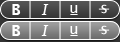
<style>
.page{position:relative;width:120px;height:42px}
.page>*{position:absolute;margin:0}
.t1{font:15px "LucidaGrande-Bold";letter-spacing:-0.025em;color:#ffffff}
.t2{font:15px "LucidaBright-Italic";letter-spacing:-0.025em;color:#ffffff}
.t3{font:15px "LucidaGrande";letter-spacing:-0.025em;color:#ffffff}
</style>
<div class="page">
<p class="t1" style="left:12px;top:4px;width:9px;height:11px">B</p>
<p class="t2" style="left:41px;top:4px;width:8px;height:11px">I</p>
<p class="t3" style="left:70px;top:5px;width:8px;height:8px">u</p>
<p class="t3" style="left:101px;top:4px;width:6px;height:10px">s</p>
<p class="t1" style="left:12px;top:25px;width:9px;height:11px">B</p>
<p class="t2" style="left:41px;top:25px;width:8px;height:11px">I</p>
<p class="t3" style="left:70px;top:26px;width:8px;height:8px">u</p>
<p class="t3" style="left:101px;top:25px;width:6px;height:10px">s</p>
</div>
